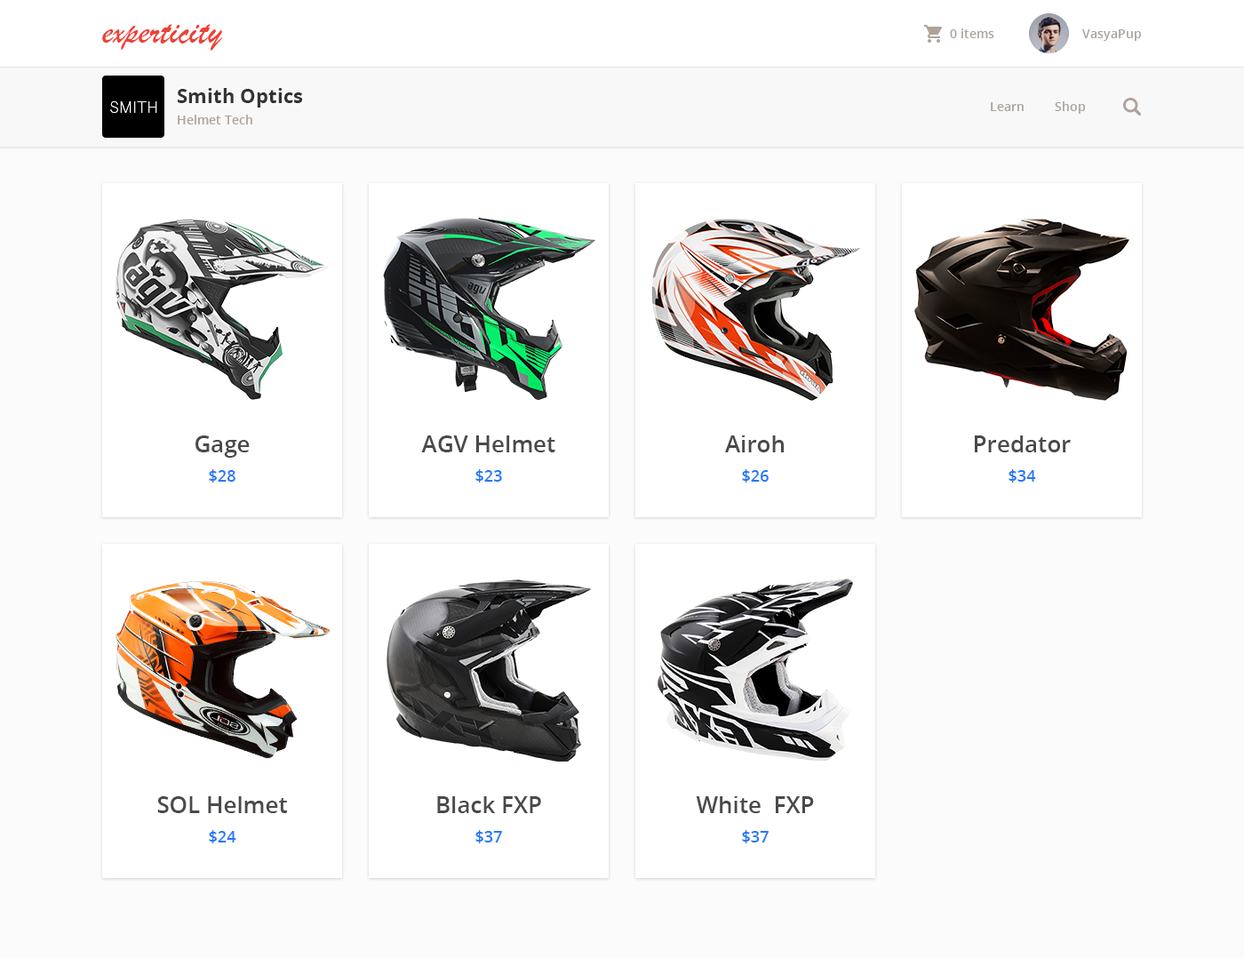
<style>
.page{position:relative;width:1244px;height:958px;background:#ffffff}
.page>*{position:absolute;margin:0}
.t1{font:37.3px "BrushScriptMT";color:#ef4036}
.t2{font:12.4px "OpenSans-Semibold";color:#aea299}
.t3{font:19.6px/21.3px "OpenSans-Bold";color:#333333}
.t4{font:12.4px/21.3px "OpenSans-Semibold";color:#aea299}
.t5{font:23.1px/42.7px "OpenSans-Semibold";color:#4a4a4a}
.t6{font:16px/29.3px "OpenSans-Semibold";color:#2579f8}
</style>
<div class="page">
<p class="t1" style="left:102px;top:24px;width:121px;height:27px">experticity</p>
<p class="t2" style="left:950px;top:28px;width:45px;height:10px">0 items</p>
<p class="t2" style="left:1083px;top:29px;width:59px;height:12px">VasyaPup</p>
<p class="t3" style="left:178px;top:88px;width:125px;height:36px">Smith Optics<br><span class="t4">Helmet Tech</span></p>
<p class="t2" style="left:1055px;top:101px;width:31px;height:13px">Shop</p>
<p class="t2" style="left:991px;top:102px;width:33px;height:9px">Learn</p>
<p class="t5" style="left:196px;top:436px;width:54px;height:47px;text-align:center">Gage<br><span class="t6">$28</span></p>
<p class="t5" style="left:421px;top:435px;width:135px;height:48px;text-align:center">AGV Helmet<br><span class="t6">$23</span></p>
<p class="t5" style="left:725px;top:435px;width:59px;height:48px;text-align:center">Airoh<br><span class="t6">$26</span></p>
<p class="t5" style="left:975px;top:435px;width:96px;height:48px;text-align:center">Predator<br><span class="t6">$34</span></p>
<p class="t5" style="left:157px;top:796px;width:130px;height:48px;text-align:center">SOL Helmet<br><span class="t6">$24</span></p>
<p class="t5" style="left:437px;top:796px;width:104px;height:48px;text-align:center">Black FXP<br><span class="t6">$37</span></p>
<p class="t5" style="left:696px;top:796px;width:118px;height:48px;text-align:center">White  FXP<br><span class="t6">$37</span></p>
</div>
